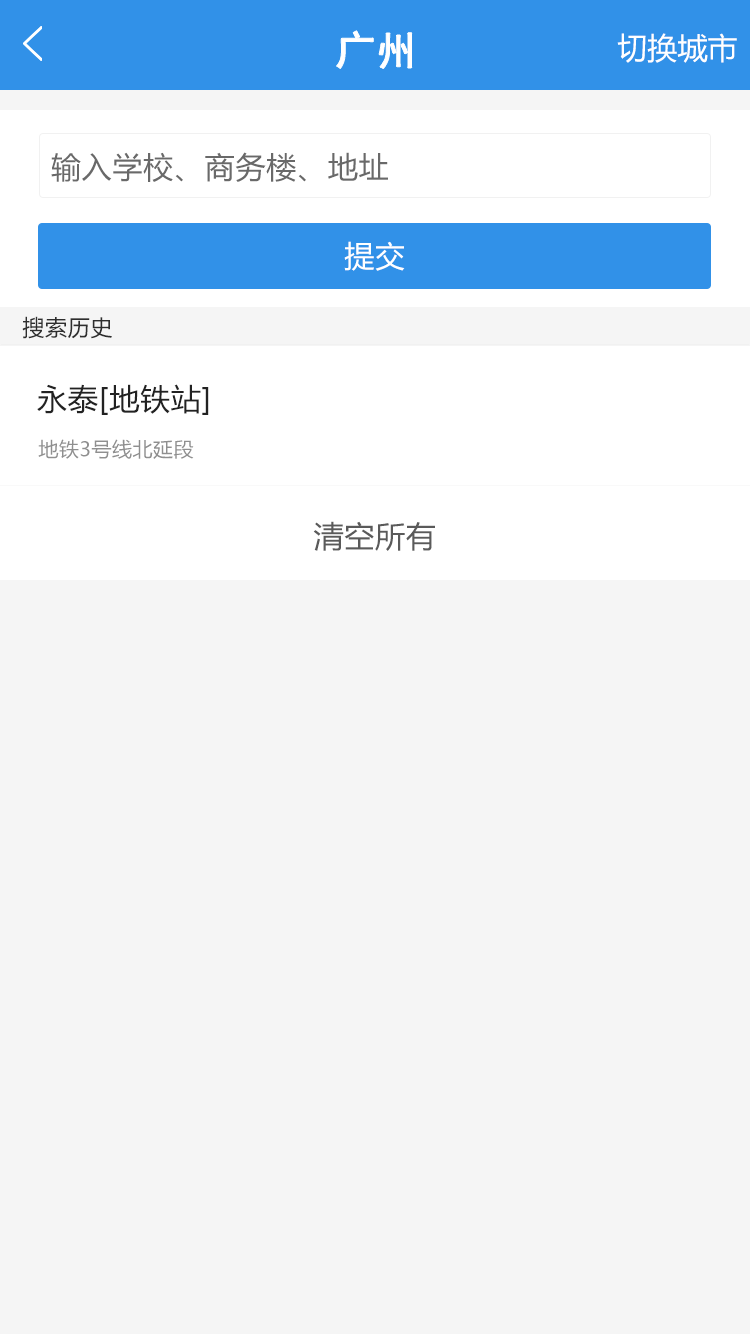
<style>
.page{position:relative;width:750px;height:1334px;background:#f5f5f5}
.page>*{position:absolute;margin:0}
.t1{font:40px "SimHei";color:#ffffff;font-weight:bold}
.t2{font:30px "MicrosoftYaHei";color:#ffffff}
.t3{font:30px "MicrosoftYaHei";letter-spacing:0.025em;color:#696969}
.t4{font:30px "MicrosoftYaHei";letter-spacing:0.025em;color:#ffffff}
.t5{font:22px "MicrosoftYaHei";letter-spacing:0.025em;color:#2e2e2e}
.t6{font:30px "MicrosoftYaHei";letter-spacing:0.025em;color:#222222}
.t7{font:20px "MicrosoftYaHei";letter-spacing:0.025em;color:#8f8f8f}
.t8{font:30px "MicrosoftYaHei";letter-spacing:0.025em;color:#595959}
</style>
<div class="page">
<p class="t1" style="left:336px;top:30px;width:76px;height:39px">广州</p>
<p class="t2" style="left:617px;top:33px;width:120px;height:30px">切换城市</p>
<p class="t3" style="left:51px;top:152px;width:337px;height:30px">输入学校、商务楼、地址</p>
<p class="t4" style="left:344px;top:241px;width:61px;height:30px">提交</p>
<p class="t5" style="left:22px;top:316px;width:90px;height:23px">搜索历史</p>
<p class="t6" style="left:37px;top:384px;width:172px;height:31px">永泰[地铁站]</p>
<p class="t7" style="left:38px;top:439px;width:156px;height:20px">地铁3号线北延段</p>
<p class="t8" style="left:313px;top:521px;width:122px;height:30px">清空所有</p>
</div>
